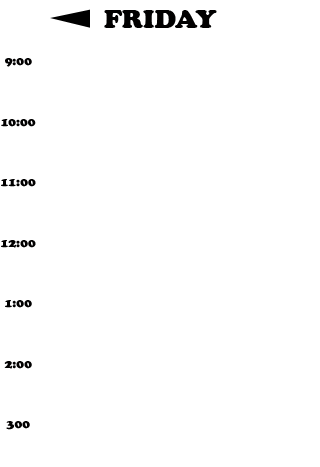
<style>
.page{position:relative;width:320px;height:467px;background:#ffffff}
.page>*{position:absolute;margin:0}
.t1{font:27.1px "CooperBlack";color:#010000}
.t2{font:12.6px "CooperBlack";color:#010000;scale:1.03 1}
.t3{font:16.2px "CooperBlack";color:#010000;scale:1.03 1}
</style>
<div class="page">
<p class="t1" style="left:104px;top:10px;width:113px;height:18px">FRIDAY</p>
<p class="t2" style="left:1px;top:58px;width:35px;height:372px;text-align:center"><span class="t3"><br></span>9:00<br><br><br><br>10:00<br><br><br><br>11:00<br><br><br><br>12:00<br><br><br><br>1:00<br><br><br><br>2:00<br><br><br><br>300</p>
</div>
